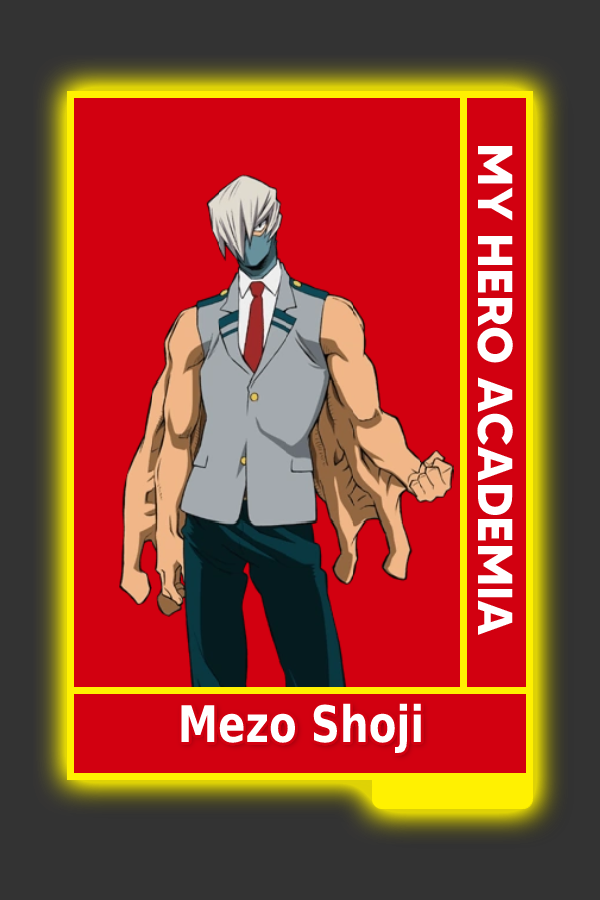
<style>
.page{position:relative;width:600px;height:900px;background:#d20010}
.page>*{position:absolute;margin:0}
.t1{font:48.8px "MADETOMMY-Bold";color:#ffffff}
.t2{font:50.5px "MADETOMMY-Bold";color:#ffffff;scale:0.8 1}
</style>
<div class="page">
<p class="t1" style="left:477px;top:146px;width:36px;height:489px;rotate:90deg">MY HERO ACADEMIA</p>
<p class="t2" style="left:181px;top:703px;width:240px;height:50px">Mezo Shoji</p>
</div>
